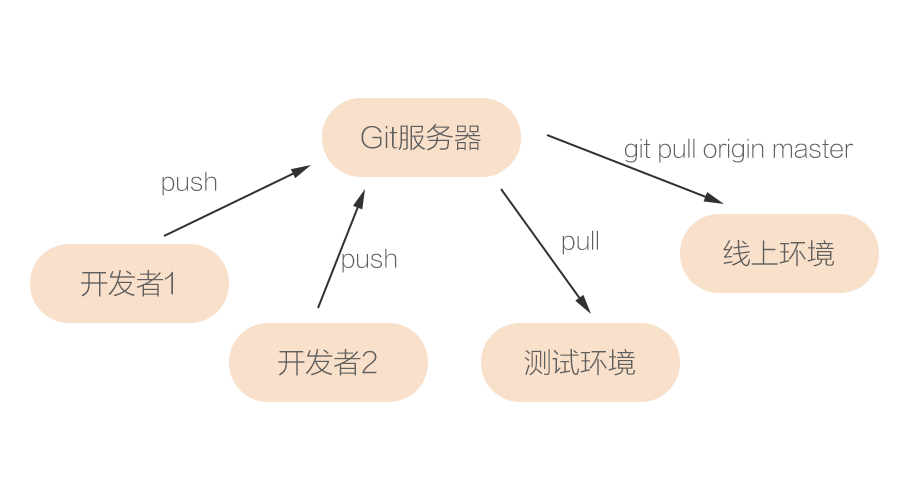
<style>
.page{position:relative;width:900px;height:500px;background:#ffffff}
.page>*{position:absolute;margin:0}
.t1{font:28px "FZLTHEL_SC--GB1-4";color:#5f5f5f}
.t2{font:24px "FZLTHEL_SC--GB1-4";color:#5f5f5f}
</style>
<div class="page">
<p class="t1" style="left:361px;top:123px;width:120px;height:28px">Git服务器</p>
<p class="t2" style="left:625px;top:138px;width:229px;height:25px">git pull origin master</p>
<p class="t2" style="left:162px;top:171px;width:55px;height:25px">push</p>
<p class="t2" style="left:562px;top:230px;width:36px;height:25px">pull</p>
<p class="t1" style="left:723px;top:240px;width:111px;height:27px">线上环境</p>
<p class="t2" style="left:342px;top:248px;width:55px;height:25px">push</p>
<p class="t1" style="left:81px;top:270px;width:92px;height:27px">开发者1</p>
<p class="t1" style="left:278px;top:349px;width:99px;height:27px">开发者2</p>
<p class="t1" style="left:524px;top:349px;width:111px;height:27px">测试环境</p>
</div>
